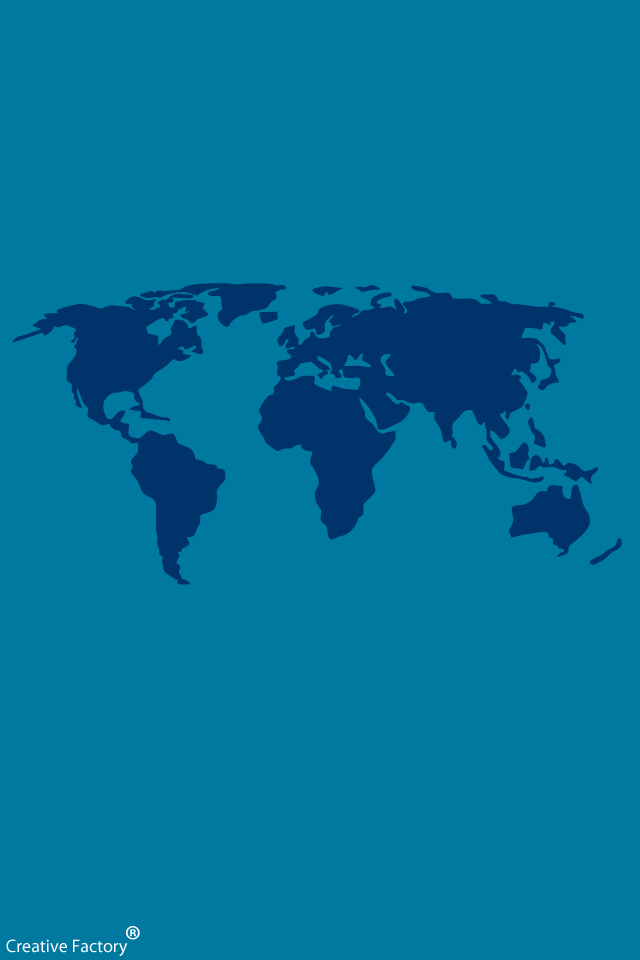
<style>
.page{position:relative;width:640px;height:960px;background:#0079a0}
.page>*{position:absolute;margin:0}
.t1{font:18px "MyriadPro-Regular";color:#ffffff}
</style>
<div class="page">
<p class="t1" style="left:6px;top:939px;width:122px;height:17px">Creative Factory</p>
</div>
